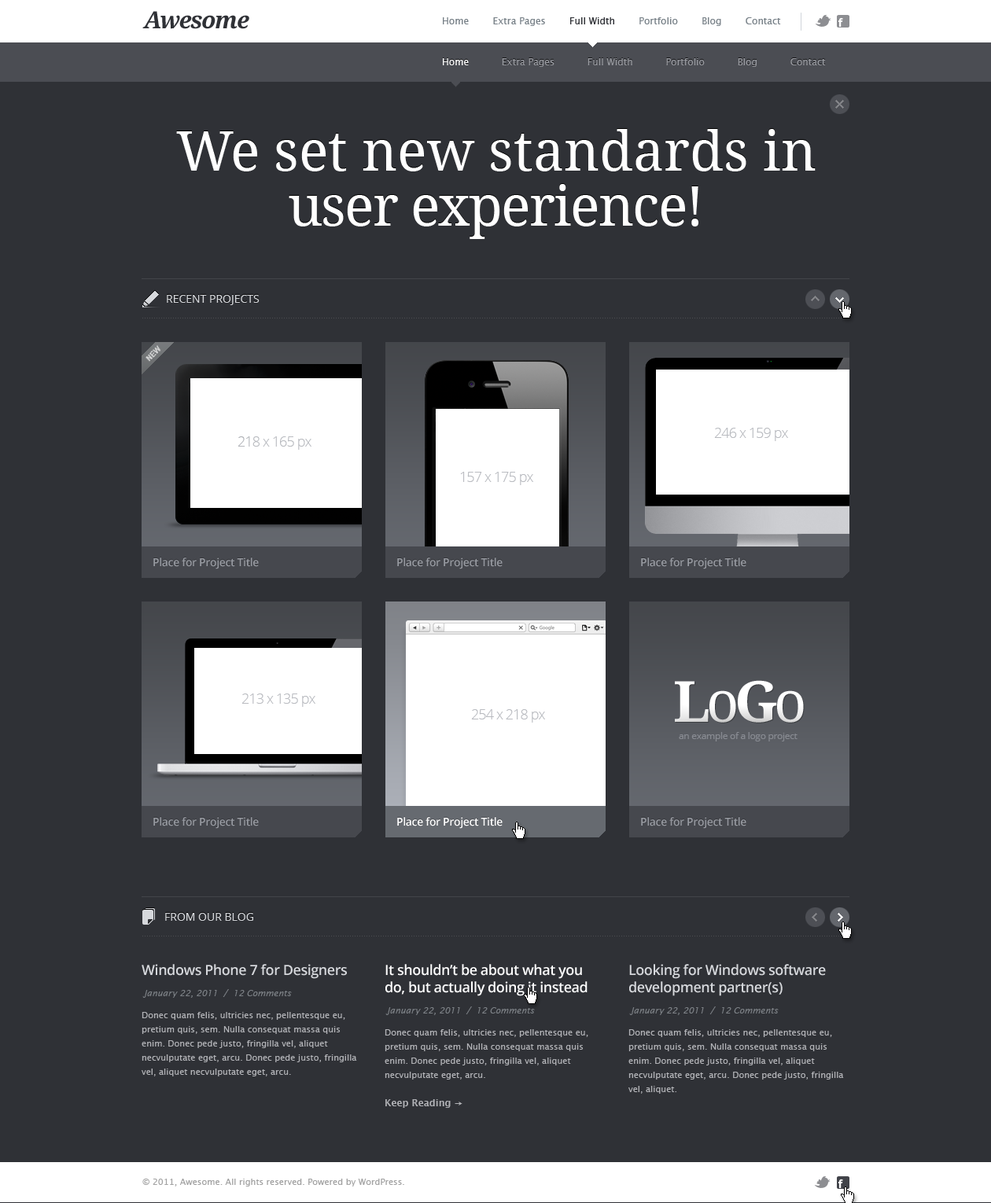
<style>
.page{position:relative;width:991px;height:1203px;background:#2f3136}
.page>*{position:absolute;margin:0}
.t1{font:23.6px "DroidSerif-BoldItalic";letter-spacing:-0.05em;color:#2f3136}
.t2{font:9.4px "LucidaSans";color:#788188}
.t3{font:9.4px "LucidaSans";color:#2f3136}
.t4{font:9.4px "LucidaSans";color:#9a9ca2}
.t5{font:9.4px "LucidaSans";color:#ffffff}
.t6{font:55.1px/55.1px "DroidSerif";color:#ffffff}
.t7{font:55.1px/55.1px "DroidSerif";letter-spacing:-0.025em;color:#ffffff}
.t8{font:11px "OpenSans";color:#d6d8dc;text-transform:uppercase}
.t9{font:11px "OpenSans-Semibold";letter-spacing:-0.025em;color:#989ba2}
.t10{font:56.6px "DroidSerif-Bold";letter-spacing:-0.075em;color:#fefefe}
.t11{font:56.6px "DroidSerif";letter-spacing:-0.075em;color:#fefefe}
.t12{font:9.4px "OpenSans";letter-spacing:-0.025em;color:#888b92}
.t13{font:11px "OpenSans-Semibold";letter-spacing:-0.025em;color:#ffffff}
.t14{font:14.2px "OpenSans-Semibold";letter-spacing:-0.025em;color:#d6d8dc}
.t15{font:14.2px/17.3px "OpenSans-Semibold";letter-spacing:-0.025em;color:#ffffff}
.t16{font:14.2px/17.3px "OpenSans-Semibold";letter-spacing:-0.025em;color:#d6d8dc}
.t17{font:8.7px "LucidaSans-Italic";color:#7b7f84}
.t18{font:8.7px/14.2px "LucidaSans";color:#b1b2b6}
.t19{font:9.4px/14.2px "LucidaSans-Demi";color:#b1b2b6}
.t20{font:8.7px "LucidaSans";color:#a2a2a2}
</style>
<div class="page">
<p class="t1" style="left:142px;top:11px;width:107px;height:18px">Awesome</p>
<p class="t2" style="left:443px;top:17px;width:338px;height:9px">Home        Extra Pages   <span class="t3">     Full Width      </span>  Portfolio        Blog        Contact</p>
<p class="t4" style="left:443px;top:58px;width:383px;height:9px"><span class="t5">Home           </span>Extra Pages           Full Width           Portfolio           Blog           Contact</p>
<p class="t6" style="left:176px;top:129px;width:640px;height:110px;text-align:center">We set new standards in <span class="t7">user experience!</span></p>
<p class="t8" style="left:167px;top:295px;width:93px;height:10px">Recent Projects</p>
<p class="t9" style="left:153px;top:558px;width:106px;height:11px">Place for Project Title</p>
<p class="t9" style="left:397px;top:558px;width:106px;height:11px">Place for Project Title</p>
<p class="t9" style="left:641px;top:558px;width:105px;height:11px">Place for Project Title</p>
<p class="t10" style="left:675px;top:680px;width:129px;height:43px">L<span class="t11">o</span>G<span class="t11">o</span></p>
<p class="t12" style="left:679px;top:732px;width:118px;height:10px">an example of a logo project</p>
<p class="t9" style="left:153px;top:817px;width:106px;height:12px">Place for Project Title</p>
<p class="t13" style="left:397px;top:817px;width:106px;height:12px">Place for Project Title</p>
<p class="t9" style="left:641px;top:817px;width:105px;height:12px">Place for Project Title</p>
<p class="t8" style="left:165px;top:913px;width:88px;height:8px">From our blog</p>
<p class="t14" style="left:142px;top:964px;width:205px;height:15px">Windows Phone 7 for Designers</p>
<p class="t15" style="left:385px;top:964px;width:202px;height:32px">It shouldn’t be about what you do, but actually doing it instead</p>
<p class="t16" style="left:629px;top:964px;width:197px;height:32px">Looking for Windows software development partner(s)</p>
<p class="t17" style="left:142px;top:989px;width:150px;height:9px">January 22, 2011  /  12 Comments</p>
<p class="t18" style="left:142px;top:1012px;width:215px;height:65px">Donec quam felis, ultricies nec, pellentesque eu, pretium quis, sem. Nulla consequat massa quis enim. Donec pede justo, fringilla vel, aliquet necvulputate eget, arcu. Donec pede justo, fringilla vel, aliquet necvulputate eget, arcu.</p>
<p class="t17" style="left:385px;top:1007px;width:150px;height:8px">January 22, 2011  /  12 Comments</p>
<p class="t17" style="left:629px;top:1007px;width:150px;height:8px">January 22, 2011  /  12 Comments</p>
<p class="t18" style="left:385px;top:1029px;width:203px;height:79px">Donec quam felis, ultricies nec, pellentesque eu, pretium quis, sem. Nulla consequat massa quis enim. Donec pede justo, fringilla vel, aliquet necvulputate eget, arcu.<br><br><span class="t19">Keep Reading →</span></p>
<p class="t18" style="left:628px;top:1029px;width:216px;height:65px">Donec quam felis, ultricies nec, pellentesque eu, pretium quis, sem. Nulla consequat massa quis enim. Donec pede justo, fringilla vel, aliquet necvulputate eget, arcu. Donec pede justo, fringilla vel, aliquet.</p>
<p class="t20" style="left:142px;top:1179px;width:262px;height:8px">© 2011, Awesome. All rights reserved. Powered by WordPress.</p>
</div>
